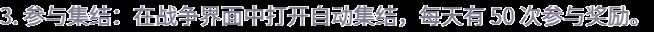
<style>
.page{position:relative;width:654px;height:32px;background:#000000}
.page>*{position:absolute;margin:0}
.t1{font:22px "WebPSD-18463539-0-Regular";color:#837a91;font-weight:bold}
</style>
<div class="page">
<p class="t1" style="left:0px;top:0px;width:654px;height:32px">3. 参与集结：在战争界面中打开自动集结，每天有 50 次参与奖励。</p>
</div>
